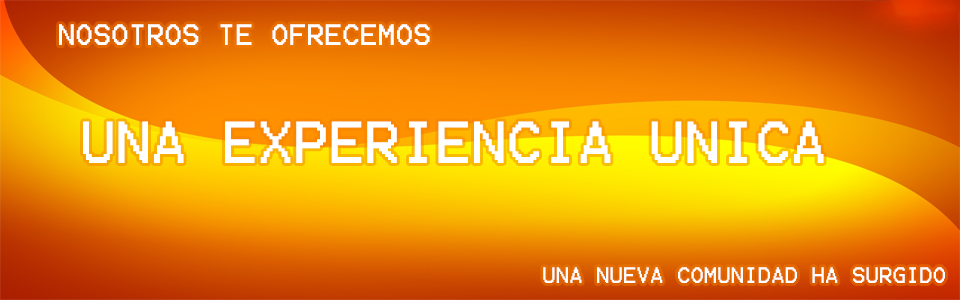
<style>
.page{position:relative;width:960px;height:300px}
.page>*{position:absolute;margin:0}
.t1{font:23.7px "Terminal";color:#ffffff;text-transform:uppercase}
.t2{font:47.4px "Terminal";color:#ffffff;text-transform:uppercase}
.t3{font:18px "Terminal";color:#ffffff;text-transform:uppercase}
</style>
<div class="page">
<p class="t1" style="left:59px;top:24px;width:371px;height:21px">Nosotros te ofrecemos</p>
<p class="t2" style="left:83px;top:121px;width:741px;height:42px">Una experiencia unica</p>
<p class="t3" style="left:543px;top:267px;width:402px;height:16px">Una nueva comunidad ha surgido</p>
</div>
